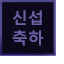
<style>
.page{position:relative;width:64px;height:64px;background:#0c0819}
.page>*{position:absolute;margin:0}
.t1{font:16px "MalgunGothicBold";color:#6861a3}
</style>
<div class="page">
<p class="t1" style="left:12px;top:10px;width:32px;height:36px">신섭<br>축하</p>
</div>
